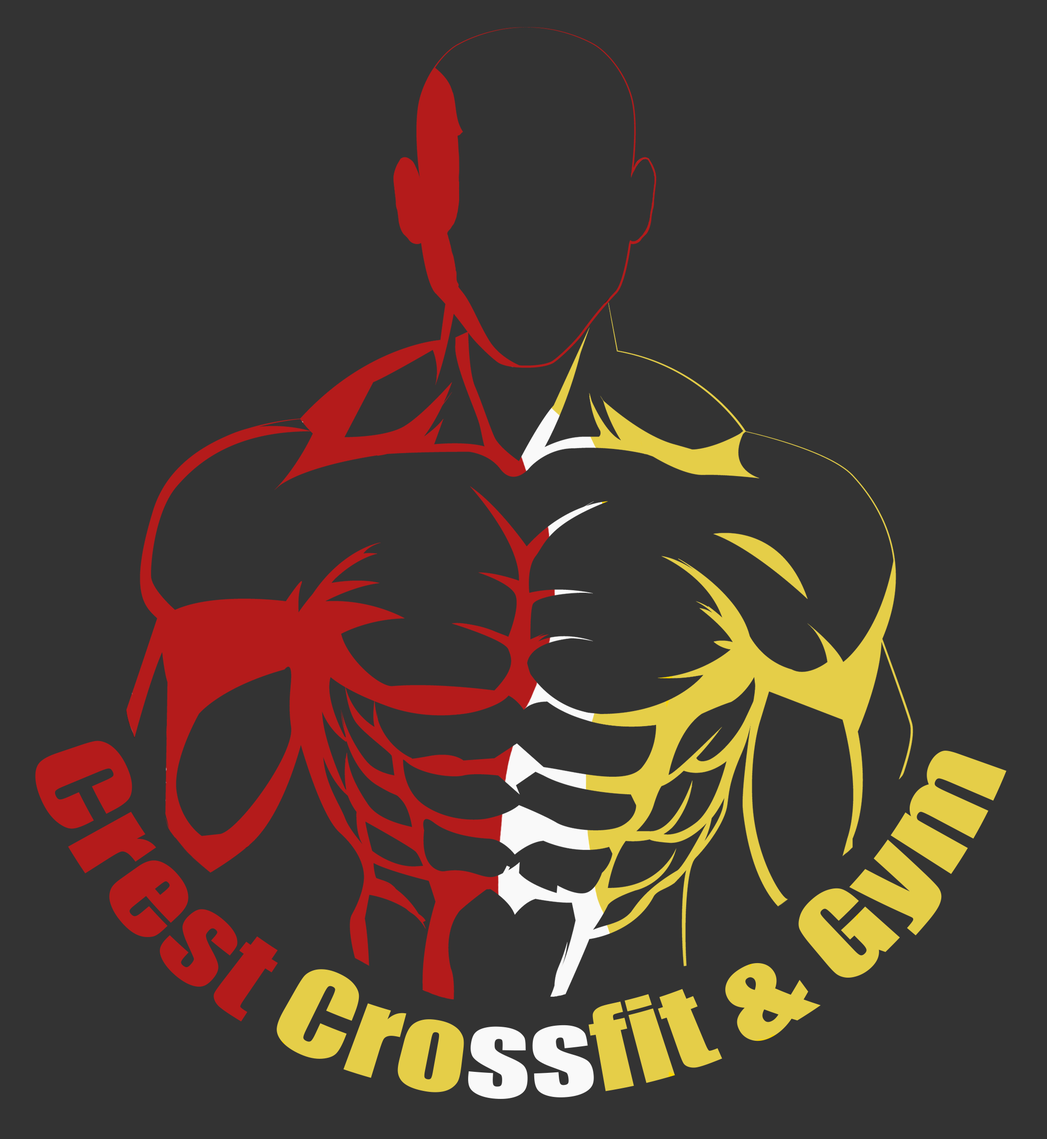
<style>
.page{position:relative;width:1047px;height:1139px;background:#333333}
.page>*{position:absolute;margin:0}
.t1{font:97.2px "Impact"}
</style>
<div class="page">
<p class="t1" style="left:35px;top:741px;width:971px;height:358px">Crest Crossfit &amp; Gym</p>
</div>
